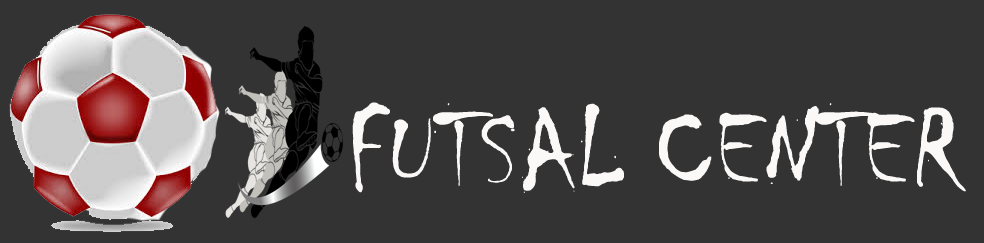
<style>
.page{position:relative;width:984px;height:243px;background:#333333}
.page>*{position:absolute;margin:0}
.t1{font:114px "Chiller-Regular";color:#fbf8f8}
</style>
<div class="page">
<p class="t1" style="left:352px;top:102px;width:614px;height:91px">FUTSAL CENTER</p>
</div>
